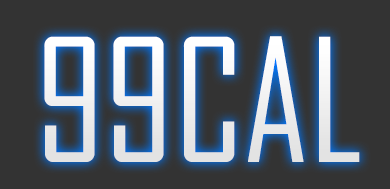
<style>
.page{position:relative;width:390px;height:189px;background:#333333}
.page>*{position:absolute;margin:0}
.t1{font:164.1px "AgencyFB-Reg";color:#ffffff}
</style>
<div class="page">
<p class="t1" style="left:44px;top:36px;width:316px;height:126px">99CAL</p>
</div>
